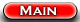
<style>
.page{position:relative;width:80px;height:22px}
.page>*{position:absolute;margin:0}
.t1{font:14px "CopperplateGothic-Bold";color:#ffffff}
</style>
<div class="page">
<p class="t1" style="left:20px;top:5px;width:37px;height:10px">Main</p>
</div>
